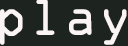
<style>
.page{position:relative;width:128px;height:46px;background:#1d2420}
.page>*{position:absolute;margin:0}
.t1{font:48px "OCRAStd";color:#fbf4f4}
</style>
<div class="page">
<p class="t1" style="left:0px;top:0px;width:127px;height:45px">play</p>
</div>
